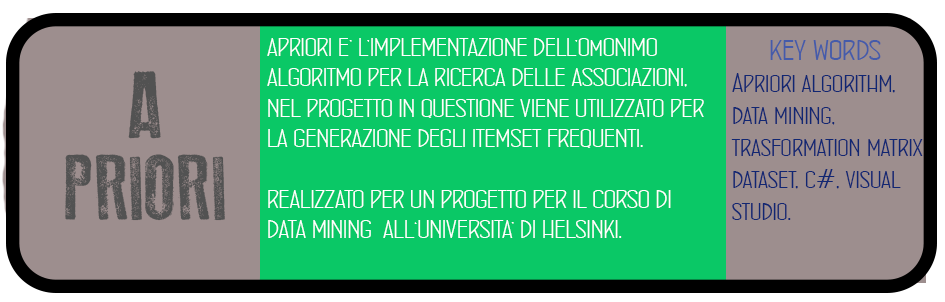
<style>
.page{position:relative;width:945px;height:302px;background:#0ac866}
.page>*{position:absolute;margin:0}
.t1{font:25.3px "ConcursoItalianBTNWide";color:#ffffff}
.t2{font:26.7px "ConcursoItalianBTNWide";color:#112672}
.t3{font:32px "ConcursoItalianBTNWide";color:#455baa}
.t4{font:93.3px "OldPress";color:#525252}
.t5{font:80px "ConcursoItalianBTNWide";color:#525252}
</style>
<div class="page">
<p class="t1" style="left:267px;top:38px;width:437px;height:200px">APRIORI E’ L’IMPLEMENTAZIONE DELL’OmONIMO <br>ALGORITMO PER LA RICERCA DELLE ASSOCIAZIONI,<br>NEL PROGETTO IN QUESTIONE VIENE UTILIZZATO PER<br>LA GENERAZIONE DEGLI ITEMSET FREQUENTI.<br><br>REALIZZATO PER UN PROGETTO PER IL CORSO DI <br>DATA MINING  ALL‘UNIVERSITA’ DI HELSINKI.</p>
<p class="t2" style="left:731px;top:40px;width:192px;height:180px"><span class="t3">     key words<br></span>Apriori algorithm,<br>data mining, <br>trasformation matrix<br>dataset, c#, visual <br>studio.</p>
<p class="t4" style="left:128px;top:71px;width:33px;height:68px"><span class="t5"> </span>A</p>
<p class="t4" style="left:65px;top:154px;width:160px;height:67px">PRIORI</p>
</div>
